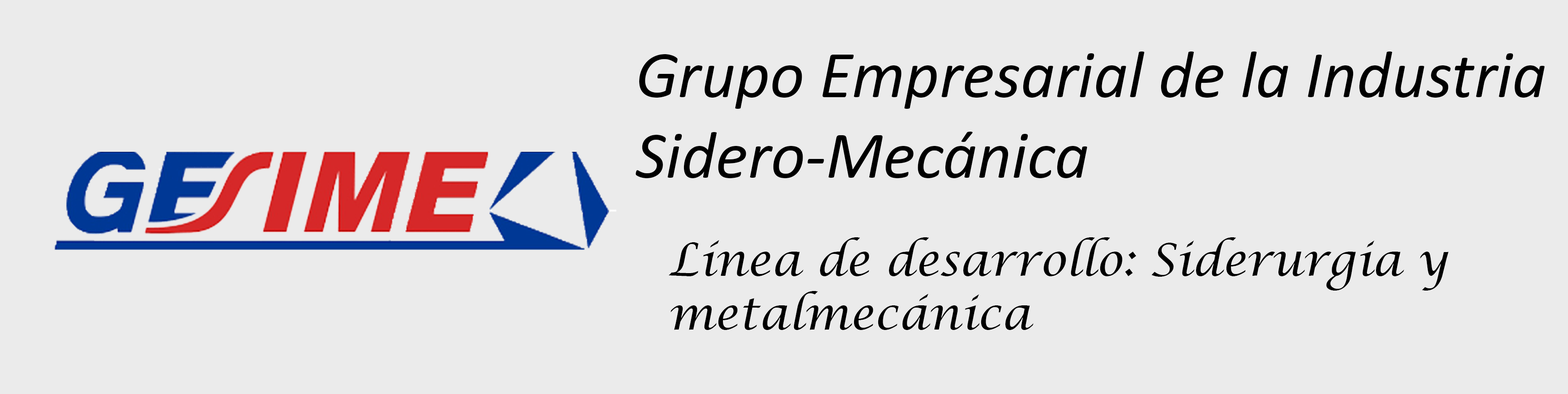
<style>
.page{position:relative;width:1568px;height:394px;background:#ebebeb}
.page>*{position:absolute;margin:0}
.t1{font:67.1px "Calibri-Italic";color:#000000}
.t2{font:44.8px "LucidaCalligraphy-Italic";color:#000000}
</style>
<div class="page">
<p class="t1" style="left:636px;top:51px;width:909px;height:127px">Grupo Empresarial de la Industria Sidero-Mecánica</p>
<p class="t2" style="left:669px;top:237px;width:779px;height:93px">Línea de desarrollo: Siderurgia y metalmecánica</p>
</div>
